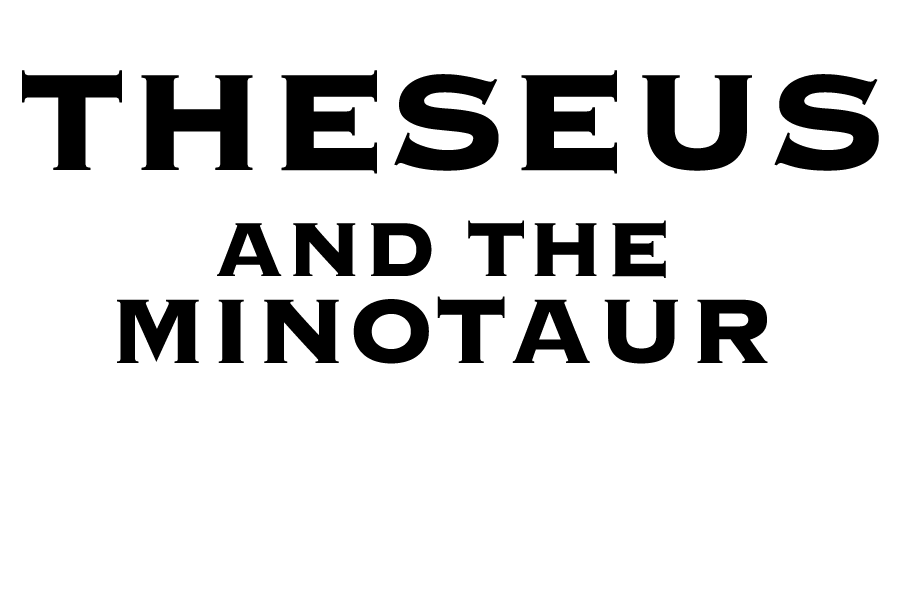
<style>
.page{position:relative;width:900px;height:600px;background:#ffffff}
.page>*{position:absolute;margin:0}
.t1{font:180px "Copperplate-Bold";color:#000000}
.t2{font:100px "Copperplate-Bold";color:#000000}
.t3{font:120px "Copperplate-Bold";color:#000000}
</style>
<div class="page">
<p class="t1" style="left:22px;top:70px;width:857px;height:104px">THESEUS</p>
<p class="t2" style="left:217px;top:220px;width:449px;height:58px">AND THE</p>
<p class="t3" style="left:117px;top:296px;width:651px;height:68px">MINOTAUR</p>
</div>
